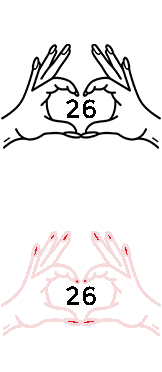
<style>
.page{position:relative;width:162px;height:372px;background:#ffffff}
.page>*{position:absolute;margin:0}
.t1{font:26px "Montserrat-Regular";letter-spacing:0.02em;color:#000000}
.t2{font:36px "Montserrat-Regular";letter-spacing:0.02em;color:#000000}
</style>
<div class="page">
<p class="t1" style="left:66px;top:99px;width:30px;height:19px"><span class="t2"><br></span>26</p>
<p class="t1" style="left:66px;top:286px;width:30px;height:19px"><span class="t2"><br></span>26</p>
</div>
